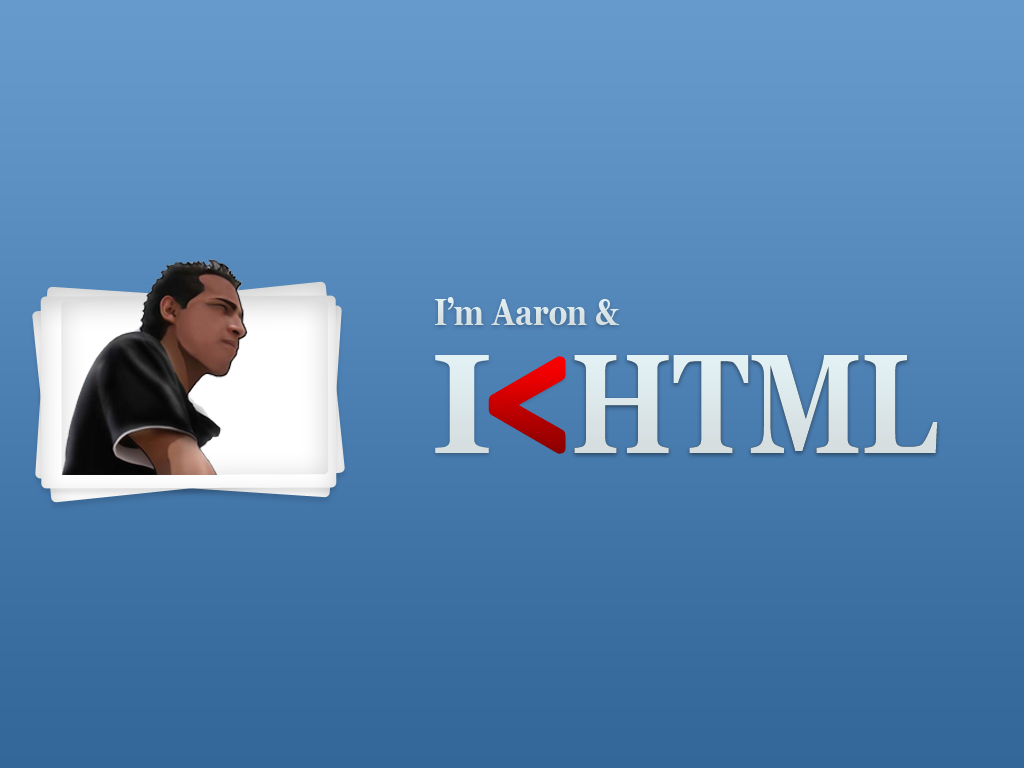
<style>
.page{position:relative;width:1024px;height:768px}
.page>*{position:absolute;margin:0}
.t1{font:38.3px "Georgia-Bold";color:#d9e3e6;scale:0.79 1}
.t2{font:141px "Georgia-Bold";letter-spacing:-0.22em;color:#dce7ea}
.t3{font:158.7px "Georgia-Bold";letter-spacing:-0.22em;scale:0.86 1}
.t4{font:141.4px "Georgia-Bold";color:#dce8ea;scale:0.79 1}
</style>
<div class="page">
<p class="t1" style="left:434px;top:297px;width:186px;height:28px">I’m Aaron &amp;</p>
<p class="t2" style="left:435px;top:355px;width:54px;height:98px">I</p>
<p class="t3" style="left:493px;top:361px;width:68px;height:88px">&lt;</p>
<p class="t4" style="left:574px;top:355px;width:364px;height:98px">HTML</p>
<p class="t4" style="left:574px;top:355px;width:364px;height:98px">HTML</p>
</div>
